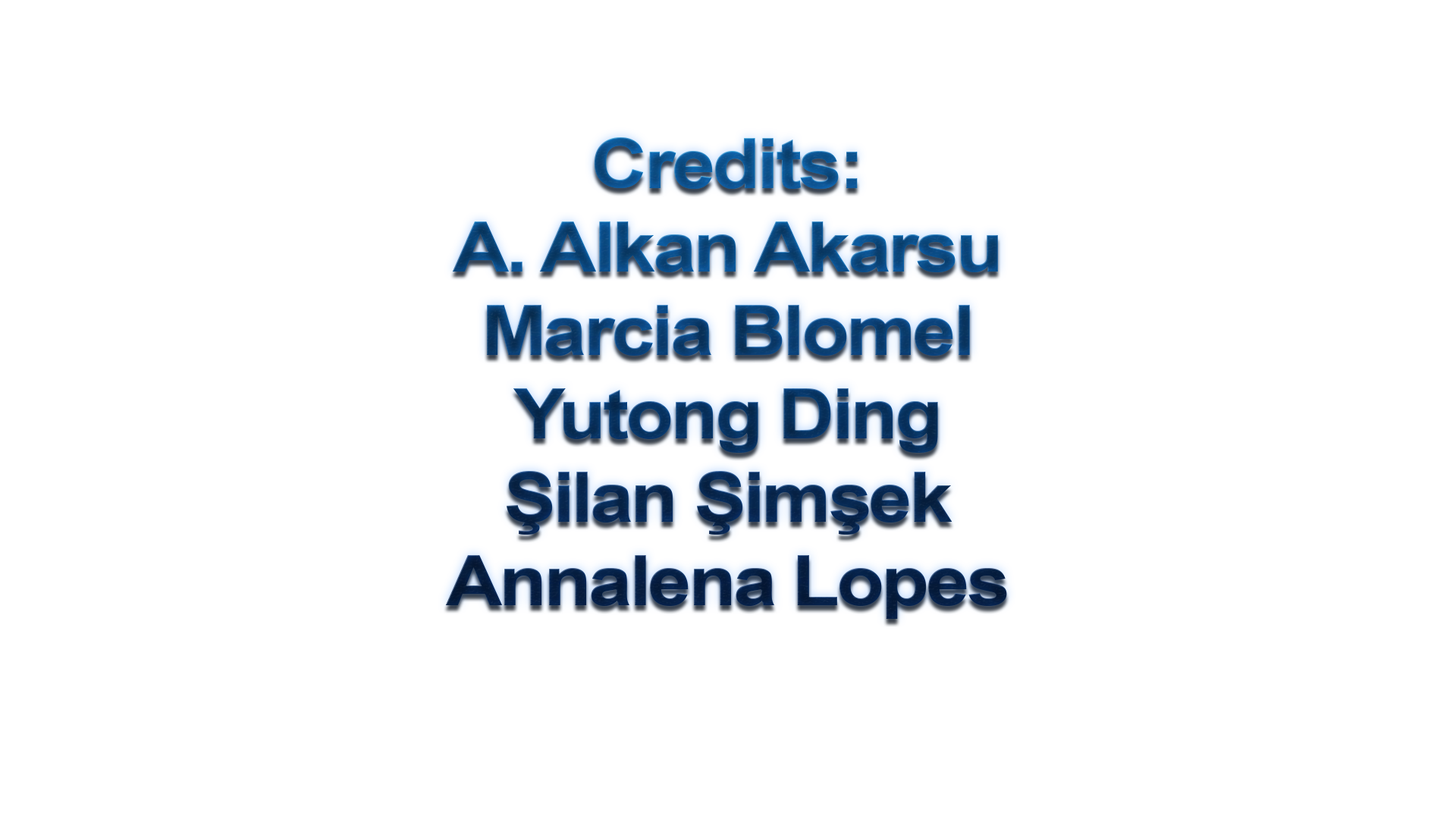
<style>
.page{position:relative;width:1456px;height:819px;background:#ffffff}
.page>*{position:absolute;margin:0}
.t1{font:69.5px "Arial-BoldMT";letter-spacing:-0.04em;scale:1.13 1}
</style>
<div class="page">
<p class="t1" style="left:445px;top:137px;width:562px;height:482px;text-align:center">Credits:<br>A. Alkan Akarsu<br>Marcia Blomel<br>Yutong Ding<br>Şilan Şimşek<br>Annalena Lopes</p>
</div>
